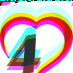
<style>
.page{position:relative;width:73px;height:73px;background:#ffffff}
.page>*{position:absolute;margin:0}
.t1{font:60px "MaturaMTScriptCapitals"}
</style>
<div class="page">
<p class="t1" style="left:6px;top:25px;width:36px;height:41px">4</p>
</div>
